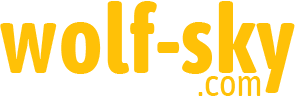
<style>
.page{position:relative;width:295px;height:96px;background:#ffffff}
.page>*{position:absolute;margin:0}
.t1{font:95px "AsapCondensed-Bold";color:#ffc107}
.t2{font:37px "AsapCondensed-Regular";color:#ffc107}
</style>
<div class="page">
<p class="t1" style="left:0px;top:1px;width:295px;height:92px">wolf-sky</p>
<p class="t2" style="left:198px;top:76px;width:63px;height:20px">.com</p>
</div>
